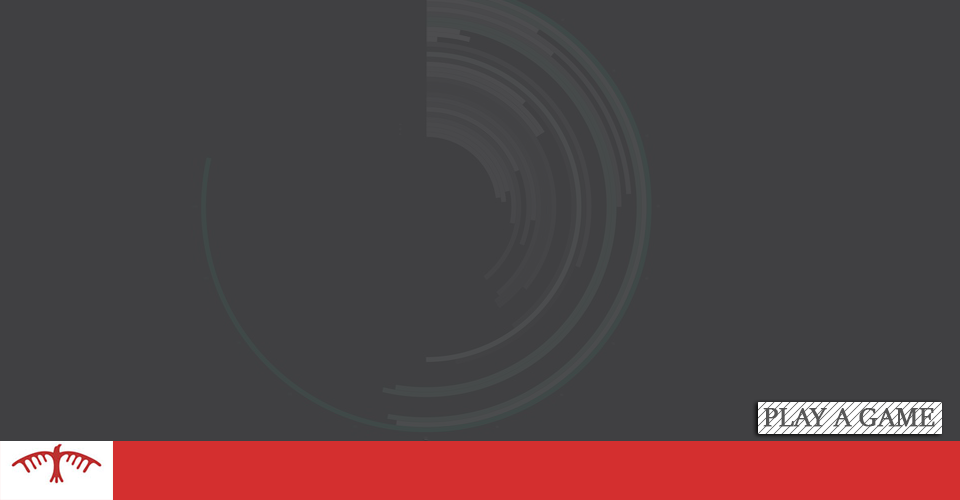
<style>
.page{position:relative;width:960px;height:500px;background:#404042}
.page>*{position:absolute;margin:0}
.t1{font:30px "SitkaBanner";color:#565656;font-weight:bold}
</style>
<div class="page">
<p class="t1" style="left:763px;top:408px;width:172px;height:19px">PLAY A GAME</p>
</div>
